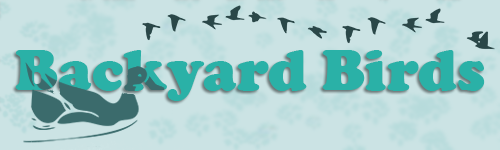
<style>
.page{position:relative;width:500px;height:150px;background:#cbe3e4}
.page>*{position:absolute;margin:0}
.t1{font:60px "CooperBlack";color:#2ab1a7}
</style>
<div class="page">
<p class="t1" style="left:15px;top:50px;width:470px;height:51px">Backyard Birds</p>
</div>
